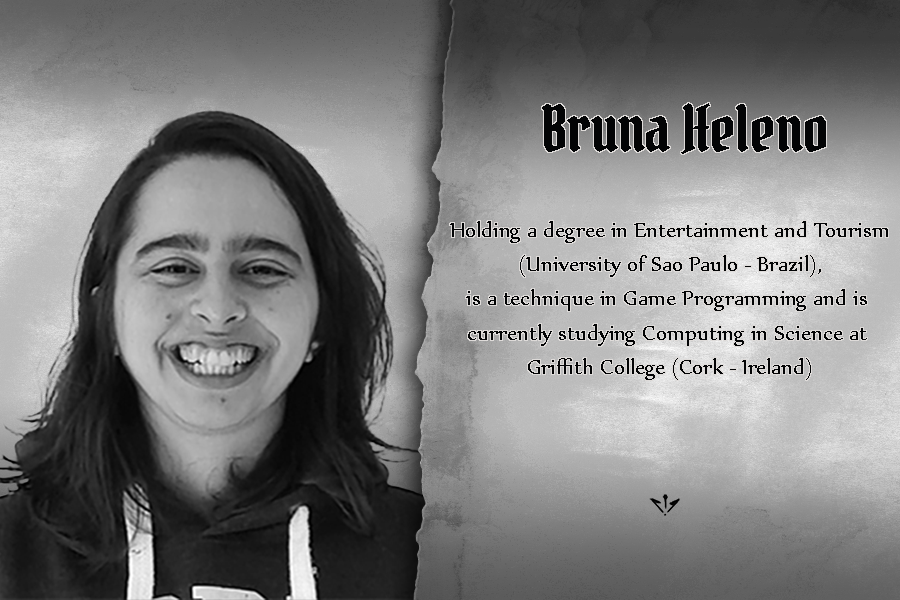
<style>
.page{position:relative;width:900px;height:600px}
.page>*{position:absolute;margin:0}
.t1{font:62.5px "PirataOne-Regular";color:#030405}
.t2{font:25px "Nyala-Regular";color:#030405}
</style>
<div class="page">
<p class="t1" style="left:542px;top:103px;width:284px;height:51px">Bruna Heleno</p>
<p class="t2" style="left:450px;top:221px;width:438px;height:159px;text-align:center">Holding a degree in Entertainment and Tourism<br> (University of Sao Paulo - Brazil), <br>is a technique in Game Programming and is <br>currently studying Computing in Science at <br>Griffith College (Cork - Ireland)</p>
</div>
